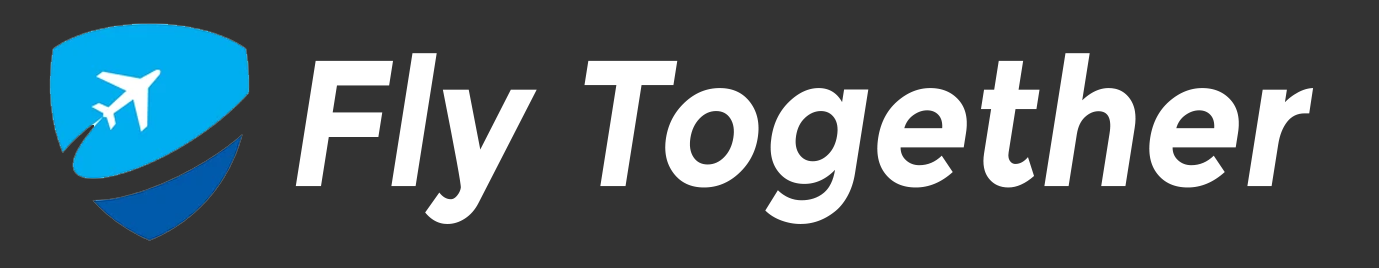
<style>
.page{position:relative;width:1379px;height:268px;background:#333333}
.page>*{position:absolute;margin:0}
.t1{font:178.7px "Montserrat-Bold";color:#ffffff;font-style:italic;scale:0.9 1}
</style>
<div class="page">
<p class="t1" style="left:295px;top:53px;width:1019px;height:171px">Fly Together</p>
</div>
